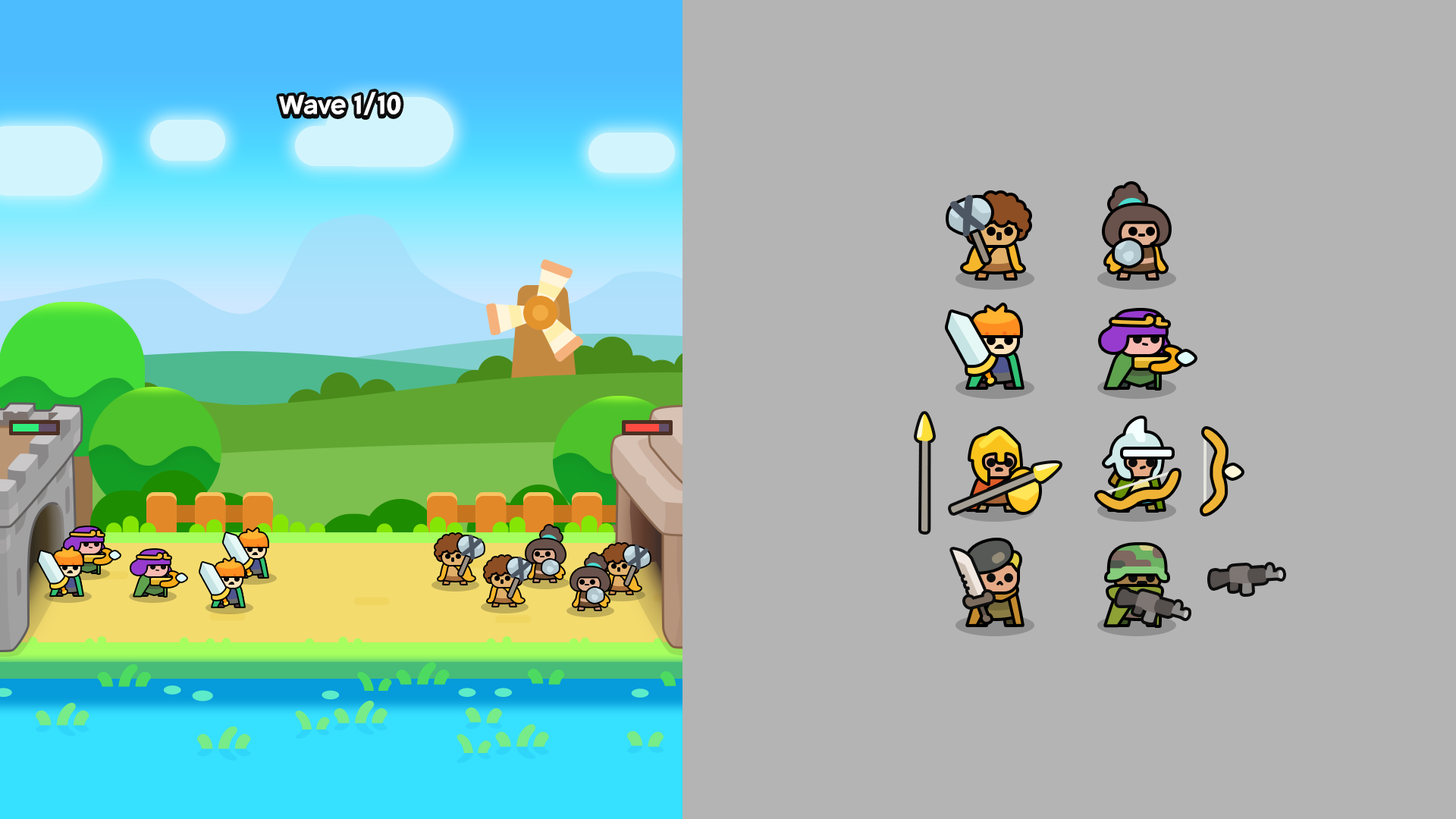
<style>
.page{position:relative;width:1456px;height:819px;background:#b4b4b4}
.page>*{position:absolute;margin:0}
.t1{font:30.3px "HSSantokki";color:#ffffff}
</style>
<div class="page">
<p class="t1" style="left:279px;top:92px;width:122px;height:23px">Wave 1/10</p>
</div>
